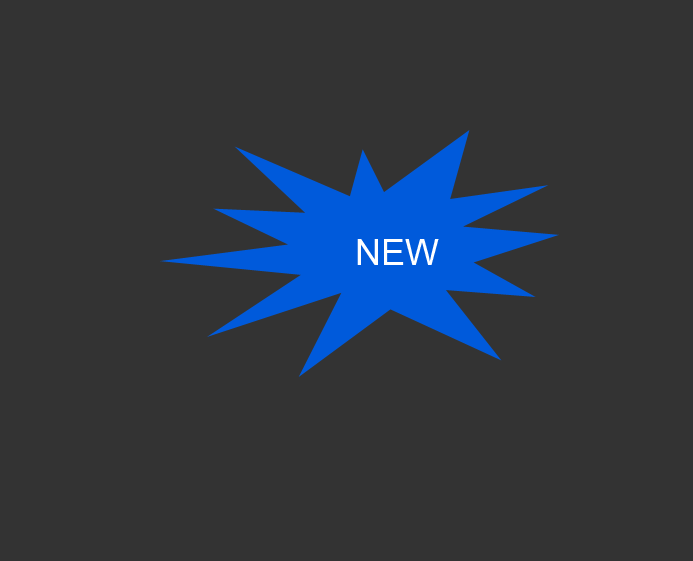
<style>
.page{position:relative;width:693px;height:561px;background:#333333}
.page>*{position:absolute;margin:0}
.t1{font:36px "ArialMT";color:#ffffff}
</style>
<div class="page">
<p class="t1" style="left:357px;top:239px;width:82px;height:26px">NEW</p>
</div>
